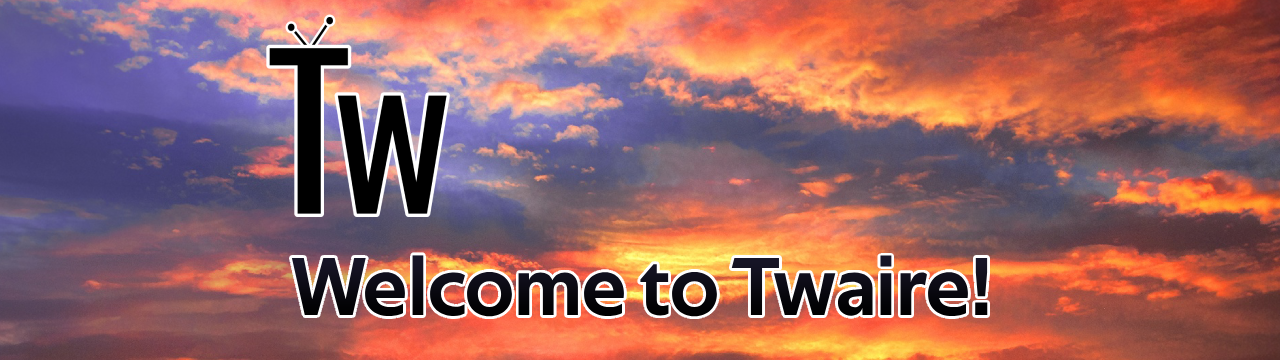
<style>
.page{position:relative;width:1280px;height:360px}
.page>*{position:absolute;margin:0}
.t1{font:83px "TechnaSans-Regular";color:#000000}
</style>
<div class="page">
<p class="t1" style="left:291px;top:255px;width:697px;height:62px">Welcome to Twaire!</p>
</div>
